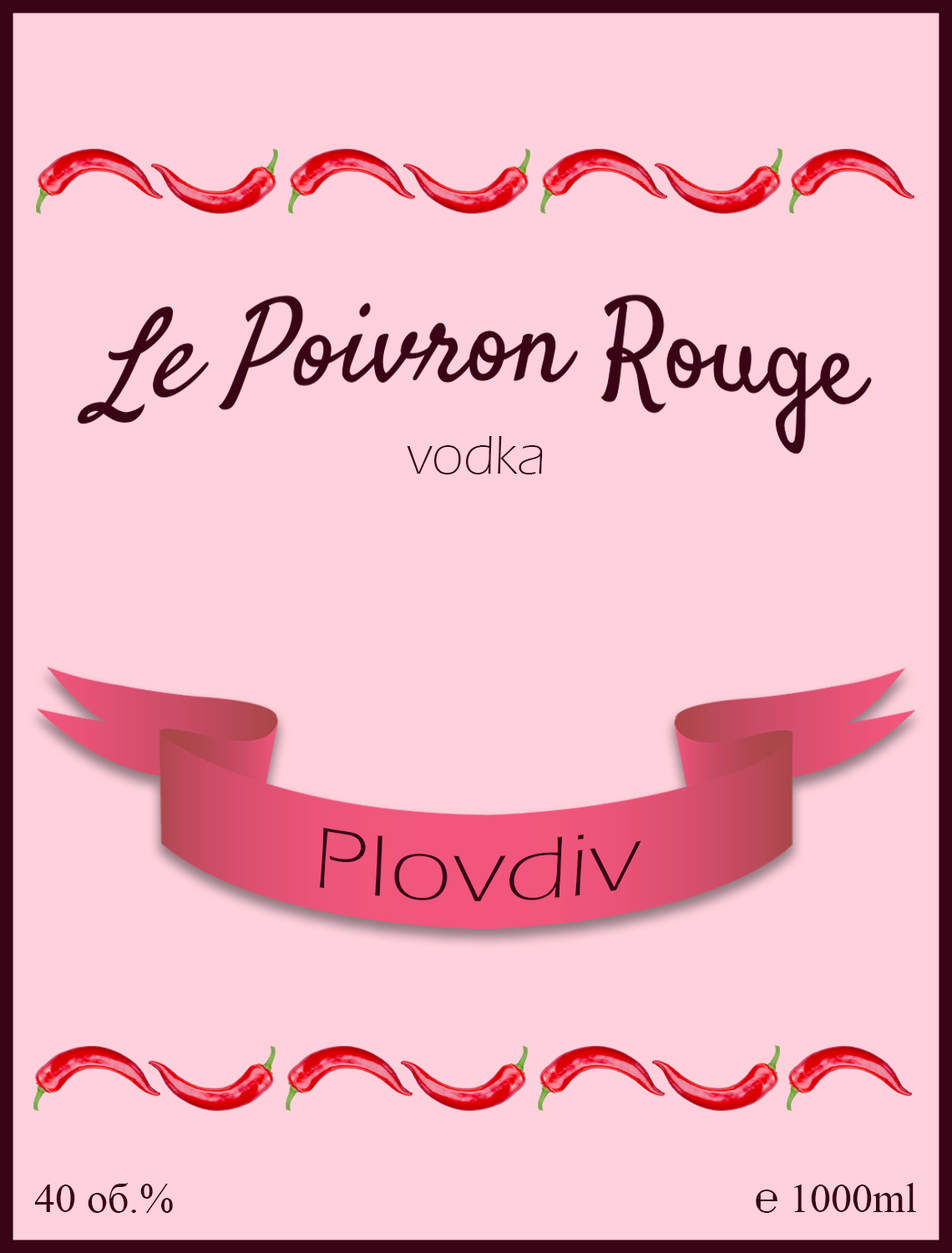
<style>
.page{position:relative;width:952px;height:1253px;background:#ffd1dc}
.page>*{position:absolute;margin:0}
.t1{font:55.7px "ErasITC-Light";color:#380416}
.t2{font:90.6px "ErasITC-Light";color:#380416;scale:1.25 1}
.t3{font:41.8px "TimesNewRomanPSMT";color:#380416}
</style>
<div class="page">
<p class="t1" style="left:407px;top:436px;width:136px;height:38px">vodka</p>
<p class="t2" style="left:319px;top:827px;width:322px;height:74px">Plovdiv</p>
<p class="t3" style="left:34px;top:1182px;width:139px;height:31px">40 об.%</p>
<p class="t3" style="left:756px;top:1182px;width:160px;height:31px">℮ 1000ml</p>
</div>
